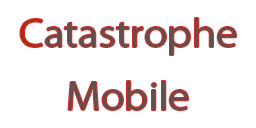
<style>
.page{position:relative;width:256px;height:128px;background:#ffffff}
.page>*{position:absolute;margin:0}
.t1{font:36px "KozGoPr6N-Regular";color:#5e504d;scale:1.11 1}
.t2{font:36px "KozGoPr6N-Regular";color:#a83110;scale:1.11 1}
</style>
<div class="page">
<p class="t1" style="left:20px;top:18px;width:216px;height:92px;text-align:justify"><span class="t2">C</span>atastrophe<br>Mobile</p>
</div>
